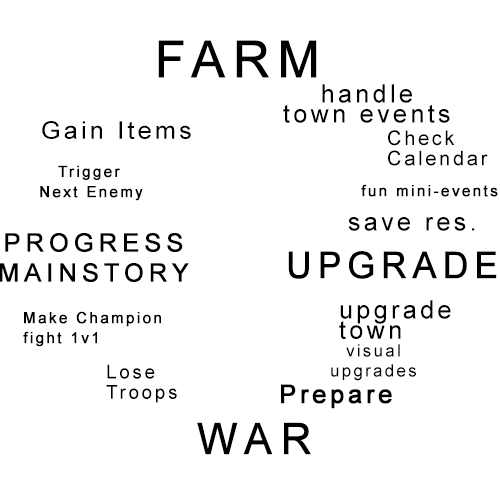
<style>
.page{position:relative;width:500px;height:500px;background:#ffffff}
.page>*{position:absolute;margin:0}
.t1{font:50.8px "ArialMT";letter-spacing:0.135em;color:#000000;font-weight:bold}
.t2{font:25.2px/10.1px "ArialMT";letter-spacing:0.135em;color:#000000}
.t3{font:24.5px "ArialMT";letter-spacing:0.135em;color:#000000}
.t4{font:20.2px/10.1px "ArialMT";letter-spacing:0.135em;color:#000000}
.t5{font:15.1px/10.1px "ArialMT";letter-spacing:0.135em;color:#000000;font-weight:bold}
.t6{font:15.2px "ArialMT";letter-spacing:0.135em;color:#000000;font-weight:bold}
.t7{font:25.4px "ArialMT";letter-spacing:0.135em;color:#000000}
.t8{font:25.4px/10px "ArialMT";letter-spacing:0.135em;color:#000000;text-transform:uppercase;font-weight:bold}
.t9{font:25.4px/0px "ArialMT";letter-spacing:0.135em;color:#000000;text-transform:uppercase;font-weight:bold}
.t10{font:36.4px "ArialMT";letter-spacing:0.135em;color:#000000;font-weight:bold}
.t11{font:17px/10px "ArialMT";letter-spacing:0.135em;color:#000000}
.t12{font:19.3px/10.1px "ArialMT";letter-spacing:0.135em;color:#000000}
.t13{font:19.3px/0px "ArialMT";letter-spacing:0.135em;color:#000000}
.t14{font:25.4px "ArialMT";letter-spacing:0.135em;color:#000000;font-weight:bold}
.t15{font:43.1px "ArialMT";letter-spacing:0.135em;color:#000000;text-transform:uppercase;font-weight:bold}
</style>
<div class="page">
<p class="t1" style="left:158px;top:40px;width:159px;height:38px">FARM</p>
<p class="t2" style="left:283px;top:84px;width:167px;height:39px;text-align:center">handle<br><br>town events</p>
<p class="t3" style="left:42px;top:121px;width:149px;height:18px">Gain Items</p>
<p class="t4" style="left:388px;top:130px;width:100px;height:36px">Check<br><br>Calendar</p>
<p class="t5" style="left:40px;top:165px;width:103px;height:36px;text-align:center">Trigger <br><br>Next Enemy</p>
<p class="t6" style="left:361px;top:184px;width:137px;height:13px">fun mini-events</p>
<p class="t7" style="left:348px;top:217px;width:127px;height:14px">save res.</p>
<p class="t8" style="left:0px;top:233px;width:189px;height:49px;text-align:center"><span class="t9">Progress<br><br><br></span><br><br>MainStory</p>
<p class="t10" style="left:288px;top:251px;width:209px;height:28px">UPGRADE</p>
<p class="t2" style="left:339px;top:300px;width:112px;height:39px">upgrade<br><br>town</p>
<p class="t5" style="left:23px;top:311px;width:138px;height:36px">Make Champion<br><br>fight 1v1</p>
<p class="t11" style="left:331px;top:344px;width:85px;height:37px;text-align:center">visual<br><br>upgrades</p>
<p class="t12" style="left:106px;top:364px;width:71px;height:39px"><span class="t13">Lose<br><br><br><br><br><br></span><br>Troops</p>
<p class="t14" style="left:281px;top:384px;width:111px;height:25px">Prepare</p>
<p class="t15" style="left:197px;top:422px;width:114px;height:33px">War</p>
</div>
